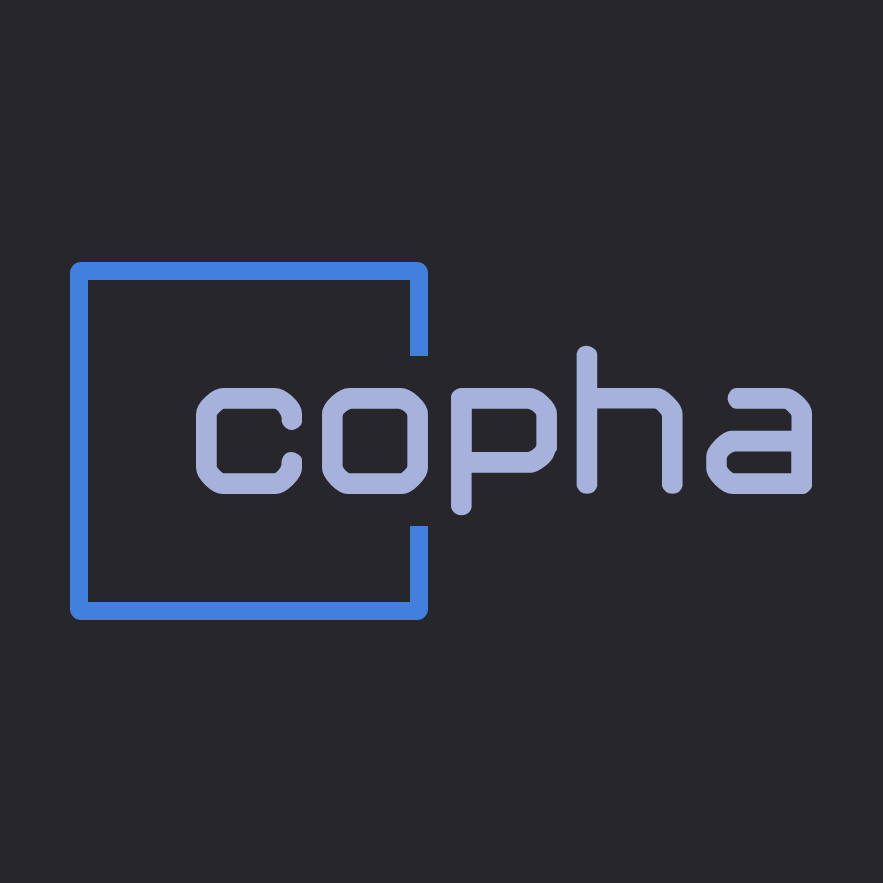
<style>
.page{position:relative;width:883px;height:883px;background:#27262b}
.page>*{position:absolute;margin:0}
.t1{font:170px "Obliviousfont";letter-spacing:0.06em;color:#a6b2dc}
</style>
<div class="page">
<p class="t1" style="left:196px;top:345px;width:617px;height:171px">copha</p>
</div>
